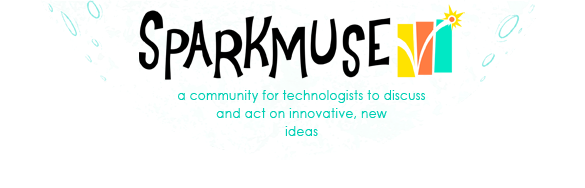
<style>
.page{position:relative;width:585px;height:188px;background:#ffffff}
.page>*{position:absolute;margin:0}
.t1{font:13px/18px "CenturyGothic";letter-spacing:0.04em;color:#00cfb4;scale:0.91 1}
</style>
<div class="page">
<p class="t1" style="left:178px;top:90px;width:247px;height:46px;text-align:center">a community for technologists to discuss and act on innovative, new <br>ideas</p>
</div>
